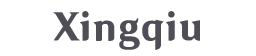
<style>
.page{position:relative;width:256px;height:56px;background:#ffffff}
.page>*{position:absolute;margin:0}
.t1{font:36px "HYWenHei-HEW";color:#4f4e57}
</style>
<div class="page">
<p class="t1" style="left:53px;top:11px;width:147px;height:39px">Xingqiu</p>
</div>
